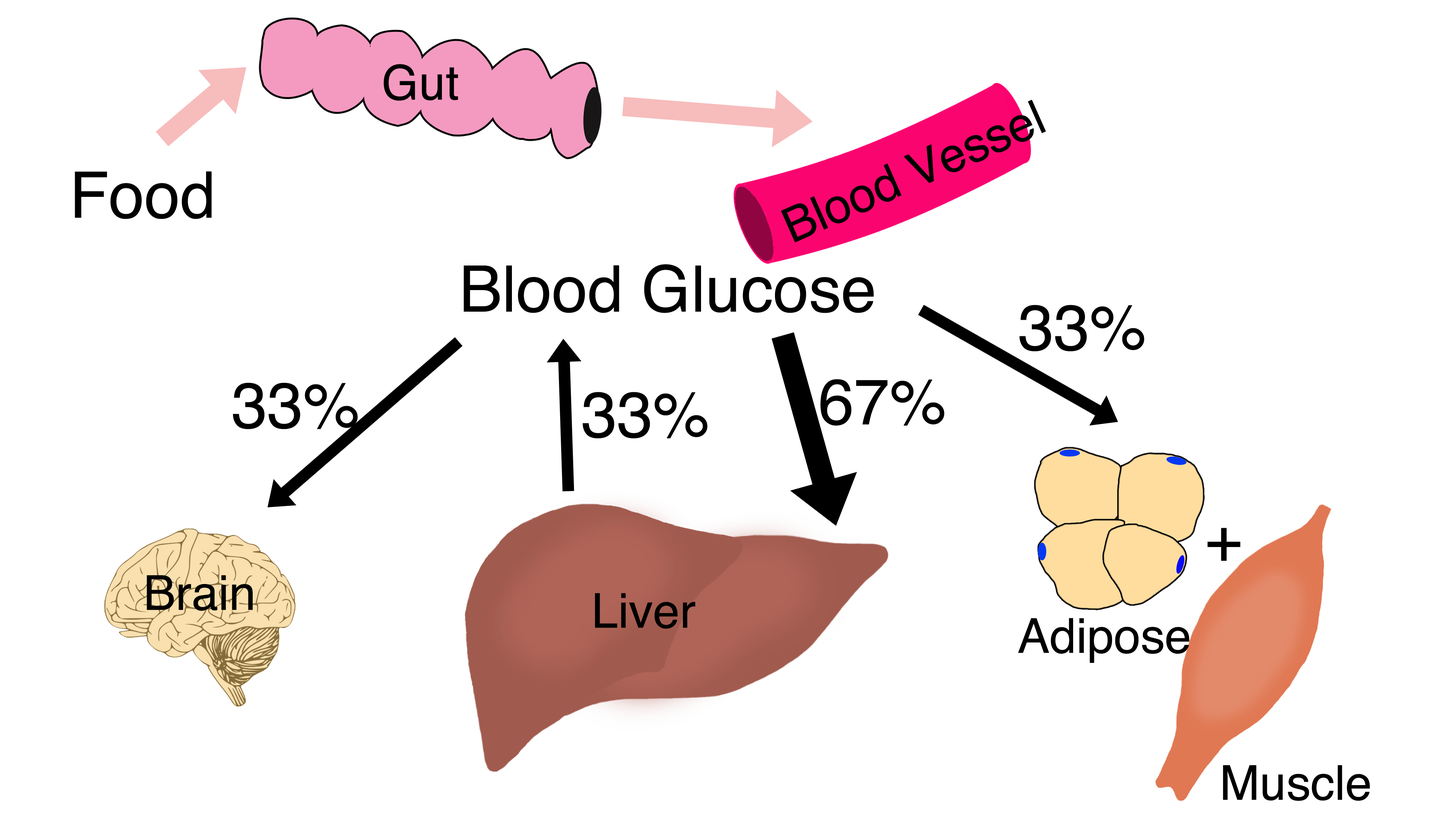
<style>
.page{position:relative;width:1456px;height:819px;background:#ffffff}
.page>*{position:absolute;margin:0}
.t1{font:48.2px "Helvetica";color:#000000}
.t2{font:64.2px "Helvetica";color:#000000}
</style>
<div class="page">
<p class="t1" style="left:384px;top:64px;width:74px;height:37px">Gut</p>
<p class="t1" style="left:781px;top:100px;width:265px;height:143px;rotate:-24deg">Blood Vessel</p>
<p class="t2" style="left:75px;top:171px;width:137px;height:48px">Food</p>
<p class="t2" style="left:464px;top:264px;width:410px;height:49px">Blood Glucose</p>
<p class="t2" style="left:1019px;top:305px;width:125px;height:46px">33%</p>
<p class="t2" style="left:233px;top:383px;width:125px;height:46px">33%</p>
<p class="t2" style="left:820px;top:379px;width:125px;height:47px">67%</p>
<p class="t2" style="left:582px;top:392px;width:126px;height:46px">33%</p>
<p class="t2" style="left:1208px;top:528px;width:32px;height:33px">+</p>
<p class="t1" style="left:147px;top:575px;width:106px;height:36px">Brain</p>
<p class="t1" style="left:595px;top:593px;width:100px;height:36px">Liver</p>
<p class="t1" style="left:1018px;top:618px;width:172px;height:45px">Adipose</p>
<p class="t1" style="left:1223px;top:765px;width:147px;height:36px">Muscle</p>
</div>
